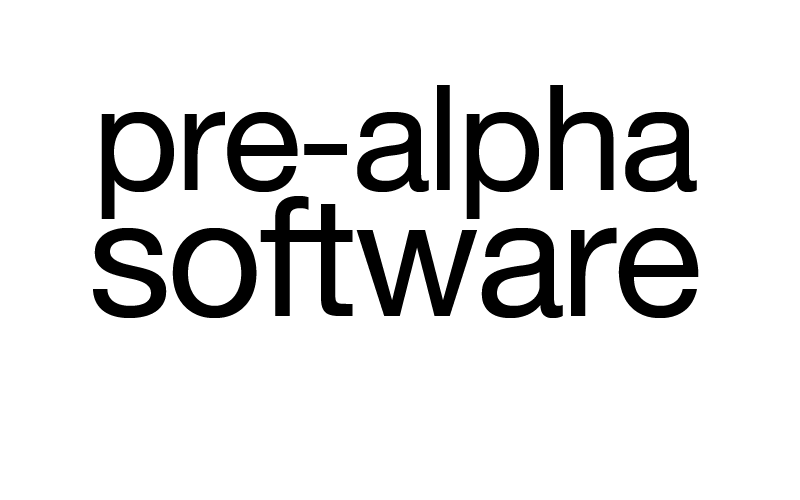
<style>
.page{position:relative;width:800px;height:500px;background:#ffffff}
.page>*{position:absolute;margin:0}
.t1{font:146.6px/126px "HelveticaNeueLTCom-Roman";letter-spacing:-0.02em;color:#000000}
.t2{font:165.6px/126px "HelveticaNeueLTCom-Roman";letter-spacing:-0.02em;color:#000000}
</style>
<div class="page">
<p class="t1" style="left:93px;top:85px;width:606px;height:233px;text-align:center">pre-alpha<br><span class="t2">software</span></p>
</div>
